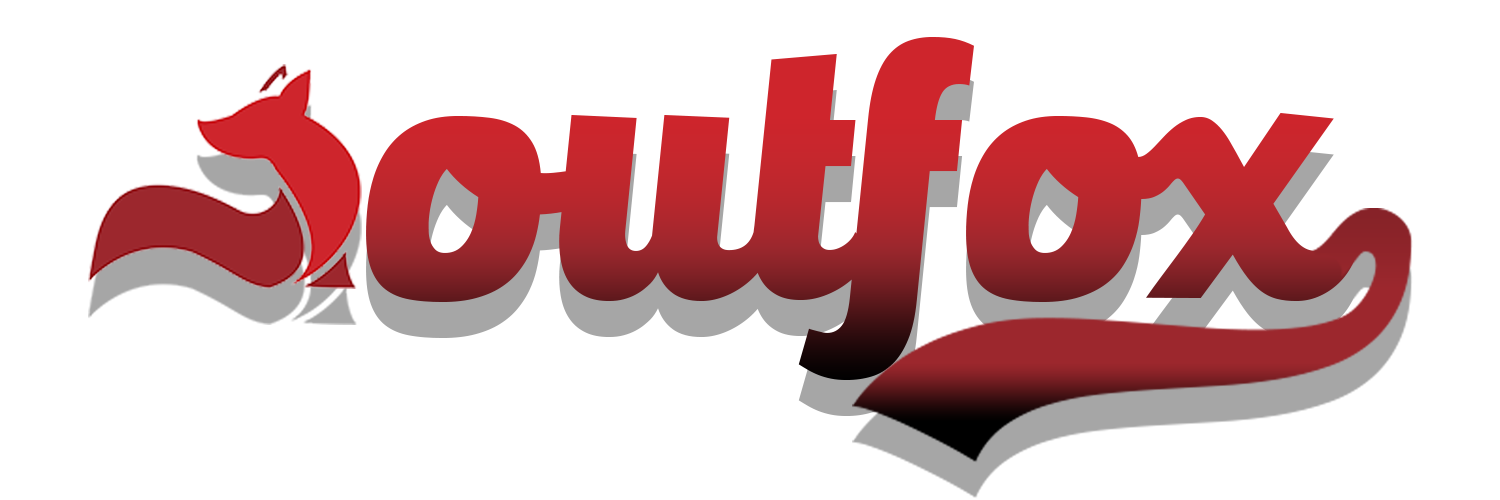
<style>
.page{position:relative;width:1500px;height:500px;background:#ffffff}
.page>*{position:absolute;margin:0}
.t1{font:340px "BullettoKilla"}
</style>
<div class="page">
<p class="t1" style="left:366px;top:37px;width:991px;height:343px">outfox</p>
</div>
